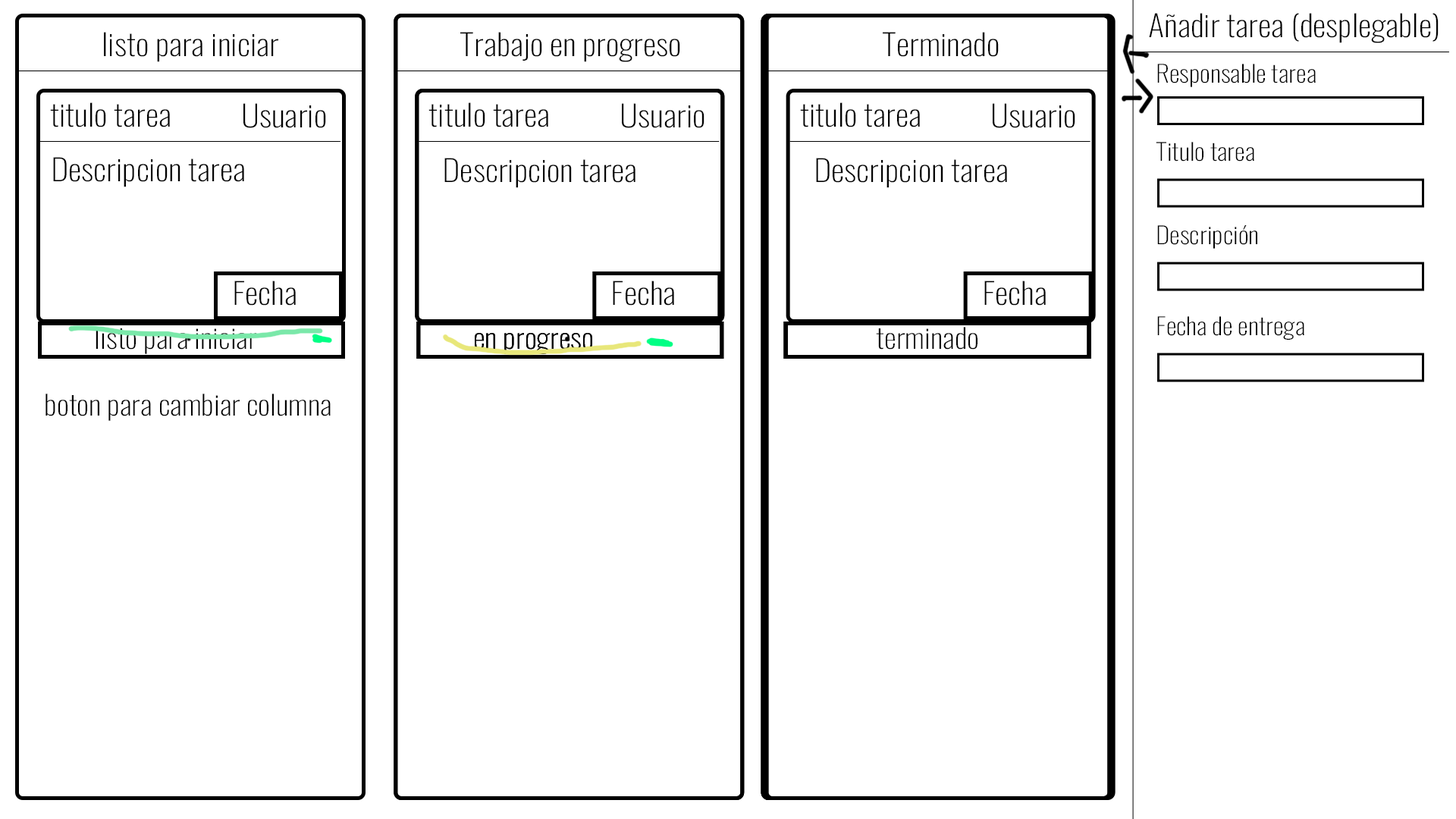
<style>
.page{position:relative;width:1456px;height:819px;background:#ffffff}
.page>*{position:absolute;margin:0}
.t1{font:50.4px "Oswald-ExtraLight";color:#000000;scale:1.16 1}
.t2{font:39.7px "Oswald-ExtraLight";color:#000000;scale:1.16 1}
.t3{font:46.2px "Oswald-ExtraLight";color:#000000;scale:1.16 1}
</style>
<div class="page">
<p class="t1" style="left:1149px;top:13px;width:290px;height:30px">Añadir tarea (desplegable)</p>
<p class="t1" style="left:104px;top:32px;width:174px;height:30px">listo para iniciar</p>
<p class="t1" style="left:460px;top:32px;width:220px;height:30px">Trabajo en progreso</p>
<p class="t1" style="left:883px;top:32px;width:116px;height:25px">Terminado</p>
<p class="t2" style="left:1157px;top:64px;width:159px;height:23px">Responsable tarea</p>
<p class="t1" style="left:50px;top:102px;width:120px;height:25px">titulo tarea</p>
<p class="t1" style="left:243px;top:103px;width:83px;height:25px">Usuario</p>
<p class="t1" style="left:428px;top:102px;width:120px;height:25px">titulo tarea</p>
<p class="t1" style="left:622px;top:103px;width:82px;height:25px">Usuario</p>
<p class="t1" style="left:800px;top:102px;width:120px;height:25px">titulo tarea</p>
<p class="t1" style="left:993px;top:103px;width:82px;height:25px">Usuario</p>
<p class="t2" style="left:1156px;top:142px;width:98px;height:20px">Titulo tarea</p>
<p class="t1" style="left:53px;top:157px;width:191px;height:30px">Descripcion tarea</p>
<p class="t1" style="left:444px;top:158px;width:191px;height:30px">Descripcion tarea</p>
<p class="t1" style="left:816px;top:158px;width:191px;height:30px">Descripcion tarea</p>
<p class="t2" style="left:1157px;top:225px;width:100px;height:24px">Descripción</p>
<p class="t1" style="left:234px;top:281px;width:62px;height:25px">Fecha</p>
<p class="t1" style="left:613px;top:281px;width:61px;height:25px">Fecha</p>
<p class="t1" style="left:984px;top:281px;width:62px;height:25px">Fecha</p>
<p class="t2" style="left:1157px;top:316px;width:147px;height:24px">Fecha de entrega</p>
<p class="t3" style="left:96px;top:327px;width:160px;height:27px">listo para iniciar</p>
<p class="t3" style="left:876px;top:327px;width:101px;height:23px">terminado</p>
<p class="t3" style="left:475px;top:333px;width:117px;height:21px">en progreso</p>
<p class="t3" style="left:475px;top:333px;width:117px;height:21px">en progreso</p>
<p class="t3" style="left:475px;top:333px;width:117px;height:21px">en progreso</p>
<p class="t3" style="left:45px;top:394px;width:286px;height:27px">boton para cambiar columna</p>
</div>
